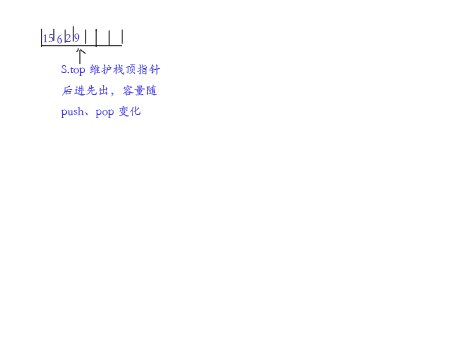
<style>
.page{position:relative;width:454px;height:340px;background:#ffffff}
.page>*{position:absolute;margin:0}
.t1{font:12px "STKaiti";color:#433be7}
</style>
<div class="page">
<p class="t1" style="left:43px;top:33px;width:37px;height:11px">15 6 2 9</p>
<p class="t1" style="left:61px;top:64px;width:100px;height:54px">S.top 维护栈顶指针<br>后进先出，容量随push、pop变化</p>
</div>
